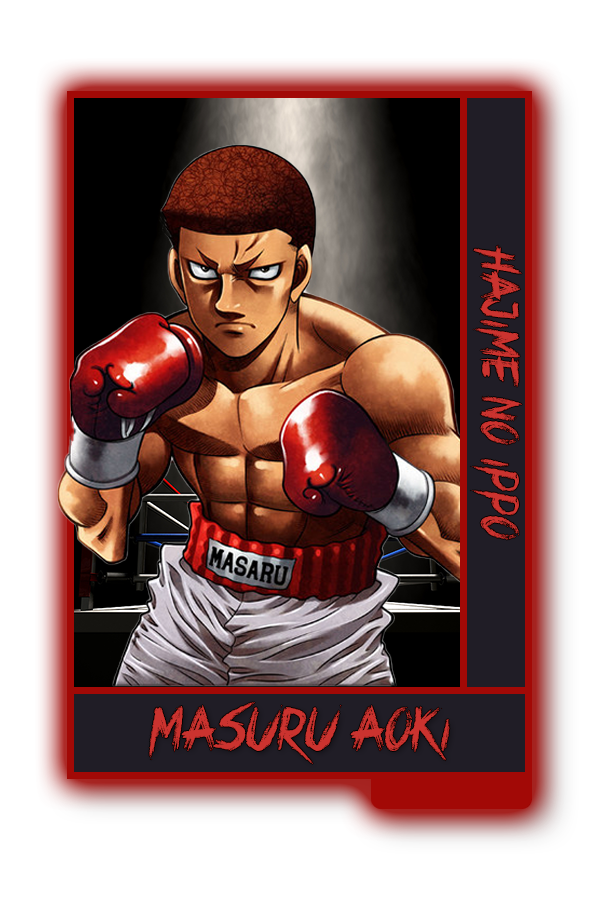
<style>
.page{position:relative;width:600px;height:900px;background:#ffffff}
.page>*{position:absolute;margin:0}
.t1{font:54.2px "CrimesTimesSix";color:#cb332f}
.t2{font:62.5px "CrimesTimesSix";color:#cb332f}
</style>
<div class="page">
<p class="t1" style="left:470px;top:245px;width:52px;height:295px;rotate:90deg">Hajime No Ippo</p>
<p class="t2" style="left:149px;top:702px;width:301px;height:62px">Masuru Aoki</p>
</div>
